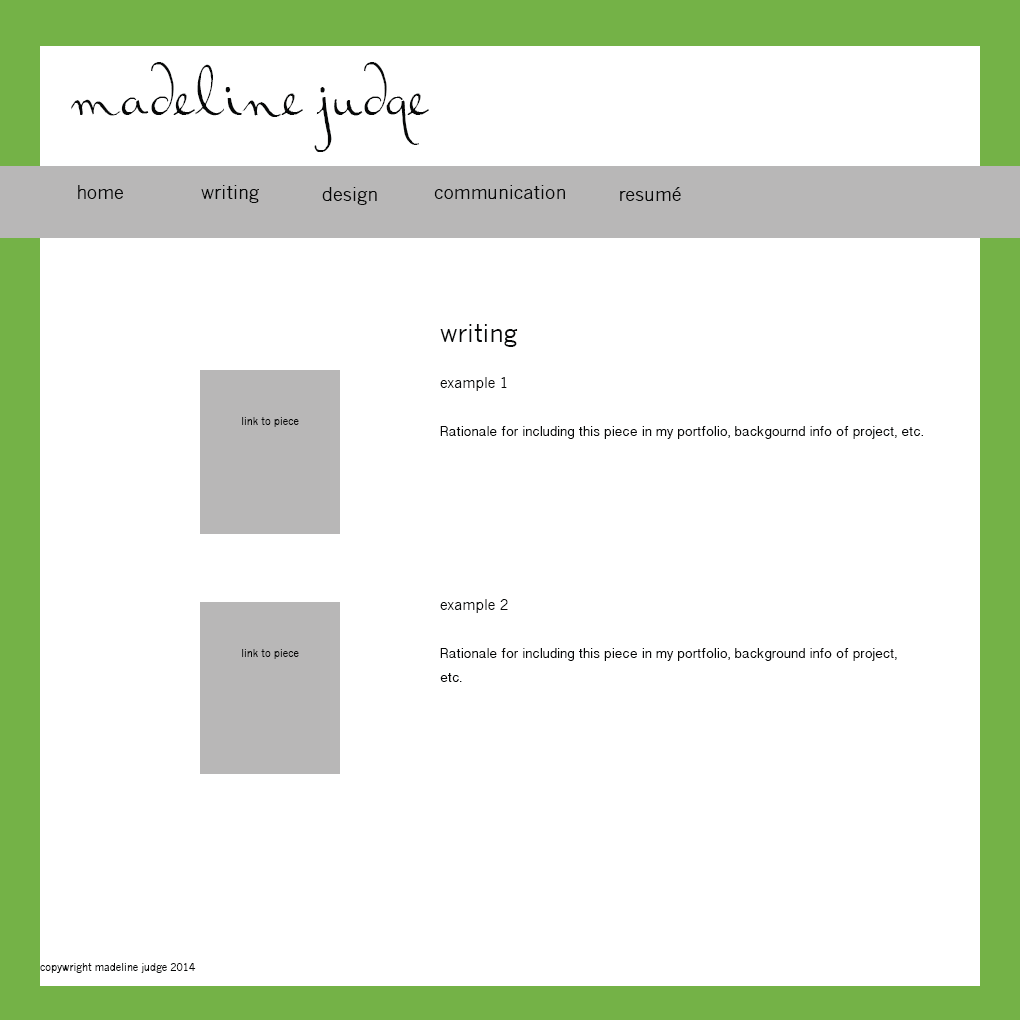
<style>
.page{position:relative;width:1020px;height:1020px;background:#ffffff}
.page>*{position:absolute;margin:0}
.t1{font:72px "RalphWalker";color:#070808}
.t2{font:18px "NewsGothicMT";color:#070808}
.t3{font:24px "NewsGothicMT";color:#070808}
.t4{font:14px/24px "BanglaSangamMN";color:#070808}
.t5{font:14px/24px "NewsGothicMT";color:#070808}
.t6{font:10px "NewsGothicMT";color:#070808}
</style>
<div class="page">
<p class="t1" style="left:71px;top:62px;width:358px;height:90px">madeline judge</p>
<p class="t2" style="left:78px;top:185px;width:45px;height:14px">home</p>
<p class="t2" style="left:201px;top:185px;width:58px;height:18px">writing</p>
<p class="t2" style="left:434px;top:185px;width:131px;height:14px">communication</p>
<p class="t2" style="left:322px;top:187px;width:55px;height:18px">design</p>
<p class="t2" style="left:620px;top:187px;width:61px;height:14px">resumé</p>
<p class="t3" style="left:440px;top:324px;width:78px;height:23px">writing</p>
<p class="t4" style="left:440px;top:377px;width:483px;height:62px"><span class="t5">example 1<br><br></span>Rationale for including this piece in my portfolio, backgournd info of project, etc.</p>
<p class="t6" style="left:242px;top:417px;width:57px;height:10px">link to piece</p>
<p class="t4" style="left:440px;top:599px;width:457px;height:83px"><span class="t5">example 2<br><br></span>Rationale for including this piece in my portfolio, background info of project, etc.</p>
<p class="t6" style="left:242px;top:649px;width:57px;height:10px">link to piece</p>
<p class="t6" style="left:40px;top:963px;width:156px;height:10px">copywright madeline judge 2014</p>
</div>
